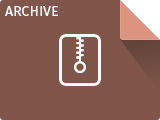
<style>
.page{position:relative;width:160px;height:120px;background:#7f5649}
.page>*{position:absolute;margin:0}
.t1{font:14px "FiraSans-Regular";color:#ffffff}
</style>
<div class="page">
<p class="t1" style="left:5px;top:6px;width:53px;height:10px">ARCHIVE</p>
</div>
